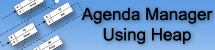
<style>
.page{position:relative;width:215px;height:50px}
.page>*{position:absolute;margin:0}
.t1{font:17px "ArialMT";color:#000000}
</style>
<div class="page">
<p class="t1" style="left:81px;top:7px;width:132px;height:37px;text-align:center">Agenda Manager<br>Using Heap</p>
</div>
